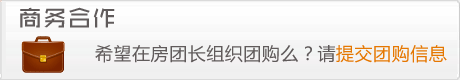
<style>
.page{position:relative;width:460px;height:80px}
.page>*{position:absolute;margin:0}
.t1{font:24px "ZHSCNMT--GBK1-0";letter-spacing:0.03em;color:#605b5b}
.t2{font:18px "MicrosoftYaHei";letter-spacing:0.03em;color:#605b5b}
.t3{font:18px "MicrosoftYaHei";letter-spacing:0.03em;color:#e57701}
</style>
<div class="page">
<p class="t1" style="left:20px;top:7px;width:95px;height:21px">商务合作</p>
<p class="t2" style="left:95px;top:45px;width:352px;height:18px">希望在房团长组织团购么？请<span class="t3">提交团购信息</span></p>
</div>
